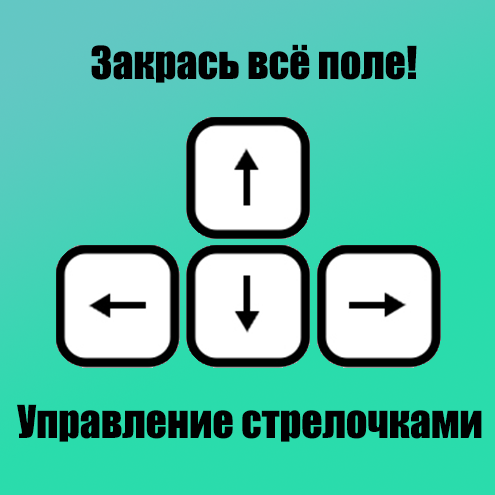
<style>
.page{position:relative;width:495px;height:495px}
.page>*{position:absolute;margin:0}
.t1{font:41.7px "Impact";color:#000000}
</style>
<div class="page">
<p class="t1" style="left:91px;top:44px;width:326px;height:39px">Закрась всё поле!</p>
<p class="t1" style="left:17px;top:404px;width:465px;height:38px">Управление стрелочками</p>
</div>
